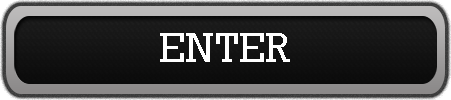
<style>
.page{position:relative;width:451px;height:100px}
.page>*{position:absolute;margin:0}
.t1{font:41.7px "Rockwell";color:#ffffff}
</style>
<div class="page">
<p class="t1" style="left:160px;top:33px;width:130px;height:29px">ENTER</p>
</div>
